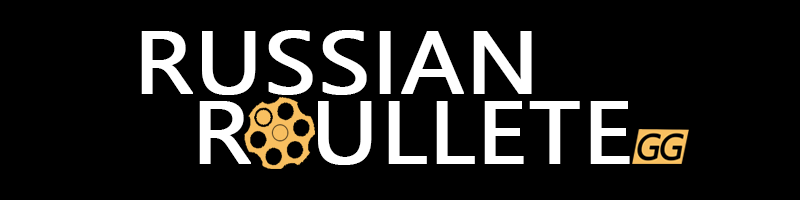
<style>
.page{position:relative;width:800px;height:200px;background:#000000}
.page>*{position:absolute;margin:0}
.t1{font:88.3px/70px "LeelawadeeUI";color:#ffffff;font-weight:bold;scale:1.1 1}
</style>
<div class="page">
<p class="t1" style="left:141px;top:30px;width:489px;height:135px">RUSSIAN<br>  R  ULLETE</p>
</div>
